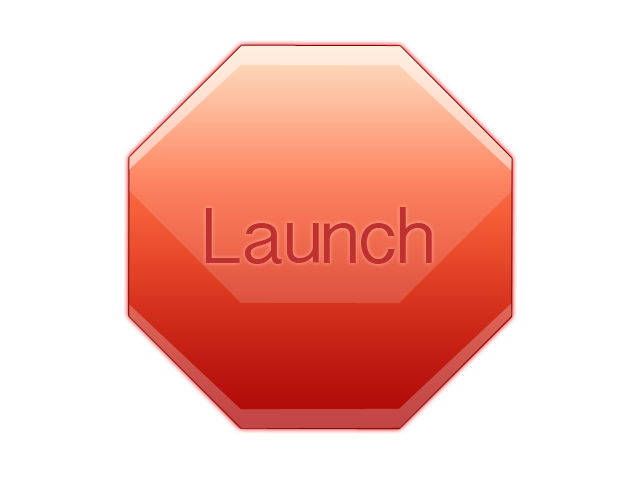
<style>
.page{position:relative;width:640px;height:480px;background:#ffffff}
.page>*{position:absolute;margin:0}
.t1{font:80px "MalayalamSangamMN";letter-spacing:-0.04em;color:#be312f}
</style>
<div class="page">
<p class="t1" style="left:205px;top:207px;width:227px;height:57px">Launch</p>
</div>
